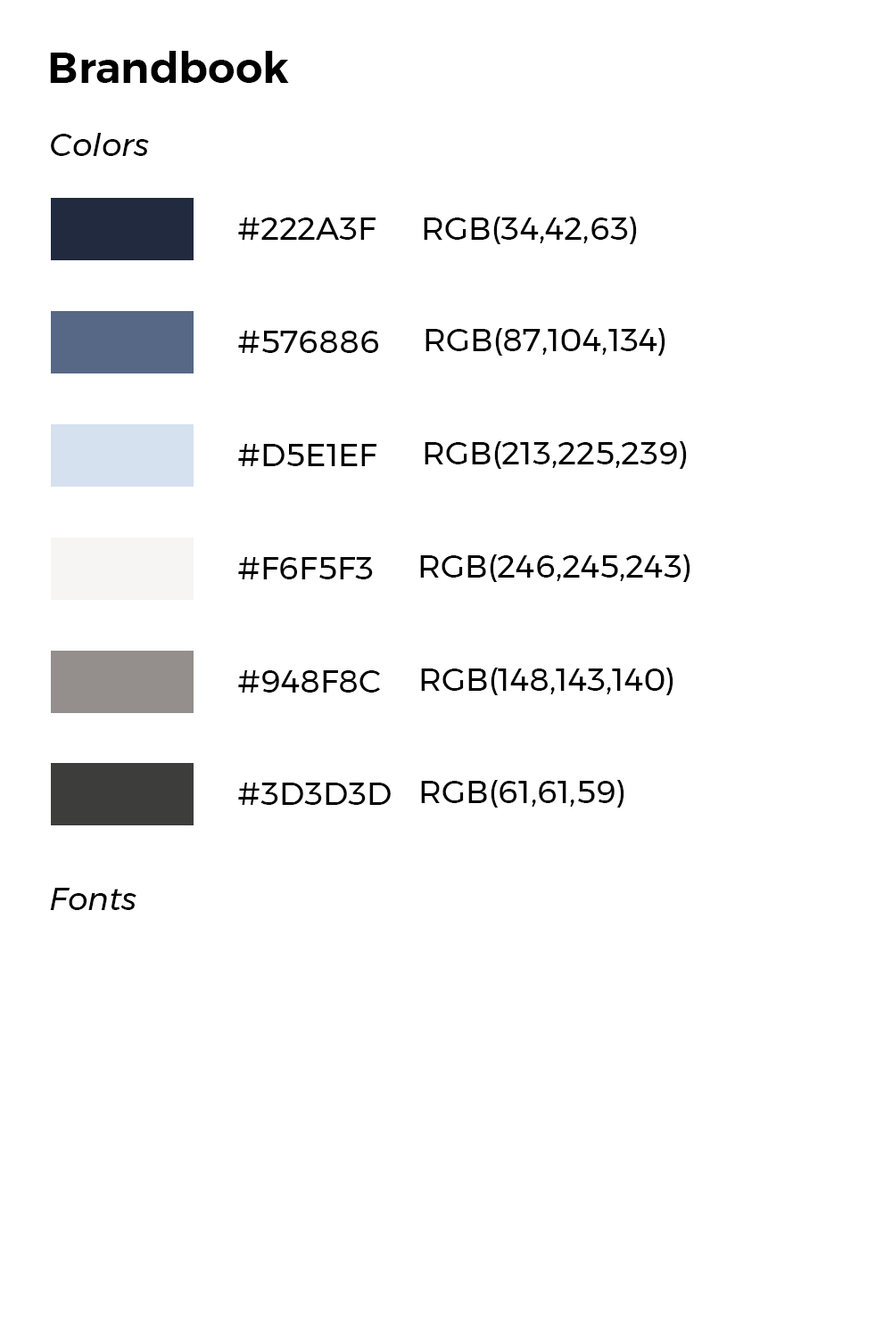
<style>
.page{position:relative;width:892px;height:1337px;background:#ffffff}
.page>*{position:absolute;margin:0}
.t1{font:42.8px "Montserrat-SemiBold";color:#000000}
.t2{font:32.1px "Montserrat-Italic";color:#000000}
.t3{font:32.1px "Montserrat-Regular";color:#000000}
</style>
<div class="page">
<p class="t1" style="left:50px;top:51px;width:239px;height:32px">Brandbook</p>
<p class="t2" style="left:51px;top:133px;width:98px;height:23px">Colors</p>
<p class="t3" style="left:238px;top:218px;width:137px;height:22px">#222A3F</p>
<p class="t3" style="left:424px;top:217px;width:213px;height:27px">RGB(34,42,63)</p>
<p class="t3" style="left:425px;top:328px;width:240px;height:28px">RGB(87,104,134)</p>
<p class="t3" style="left:238px;top:331px;width:141px;height:22px">#576886</p>
<p class="t3" style="left:238px;top:444px;width:138px;height:22px">#D5E1EF</p>
<p class="t3" style="left:424px;top:441px;width:263px;height:28px">RGB(213,225,239)</p>
<p class="t3" style="left:238px;top:557px;width:135px;height:23px">#F6F5F3</p>
<p class="t3" style="left:420px;top:555px;width:270px;height:27px">RGB(246,245,243)</p>
<p class="t3" style="left:238px;top:670px;width:142px;height:23px">#948F8C</p>
<p class="t3" style="left:421px;top:668px;width:252px;height:27px">RGB(148,143,140)</p>
<p class="t3" style="left:238px;top:783px;width:153px;height:22px">#3D3D3D</p>
<p class="t3" style="left:421px;top:780px;width:203px;height:28px">RGB(61,61,59)</p>
<p class="t2" style="left:50px;top:888px;width:86px;height:22px">Fonts</p>
</div>
